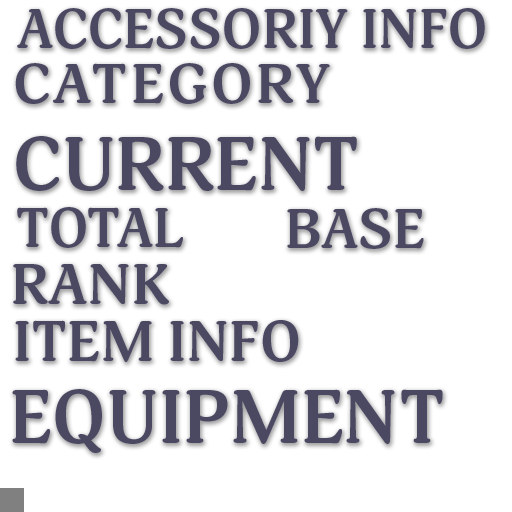
<style>
.page{position:relative;width:512px;height:512px;background:#ffffff}
.page>*{position:absolute;margin:0}
.t1{font:55.3px "Adonis-Bold";letter-spacing:-0.005em;color:#4b4861}
.t2{font:55.3px "Adonis-Bold";letter-spacing:0.05em;color:#4b4861;scale:1.06 1}
.t3{font:74.3px "Adonis-Bold";letter-spacing:-0.005em;color:#4b4861}
.t4{font:56.8px "Adonis-Bold";letter-spacing:-0.005em;color:#4b4861;scale:1.05 1}
.t5{font:55.9px "Adonis-Bold";letter-spacing:-0.005em;color:#4b4861;scale:1.04 1}
</style>
<div class="page">
<p class="t1" style="left:17px;top:8px;width:468px;height:41px">ACCESSORIY INFO</p>
<p class="t2" style="left:15px;top:63px;width:315px;height:41px">CATEGORY</p>
<p class="t3" style="left:16px;top:136px;width:341px;height:55px">CURRENT</p>
<p class="t1" style="left:17px;top:207px;width:166px;height:41px">TOTAL</p>
<p class="t1" style="left:287px;top:208px;width:137px;height:41px">BASE</p>
<p class="t4" style="left:13px;top:264px;width:156px;height:41px">RANK</p>
<p class="t5" style="left:15px;top:320px;width:284px;height:42px">ITEM INFO</p>
<p class="t3" style="left:12px;top:389px;width:431px;height:64px">EQUIPMENT</p>
</div>
